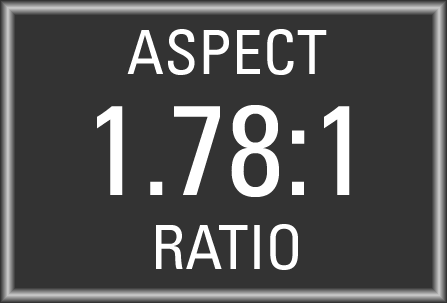
<style>
.page{position:relative;width:447px;height:303px;background:#333333}
.page>*{position:absolute;margin:0}
.t1{font:61.1px "AeonPlayer";color:#ffffff}
.t2{font:127.8px "AeonPlayer";color:#ffffff}
</style>
<div class="page">
<p class="t1" style="left:127px;top:29px;width:200px;height:46px">ASPECT</p>
<p class="t2" style="left:97px;top:105px;width:253px;height:92px">1.78:1</p>
<p class="t1" style="left:156px;top:224px;width:142px;height:46px">RATIO</p>
</div>
